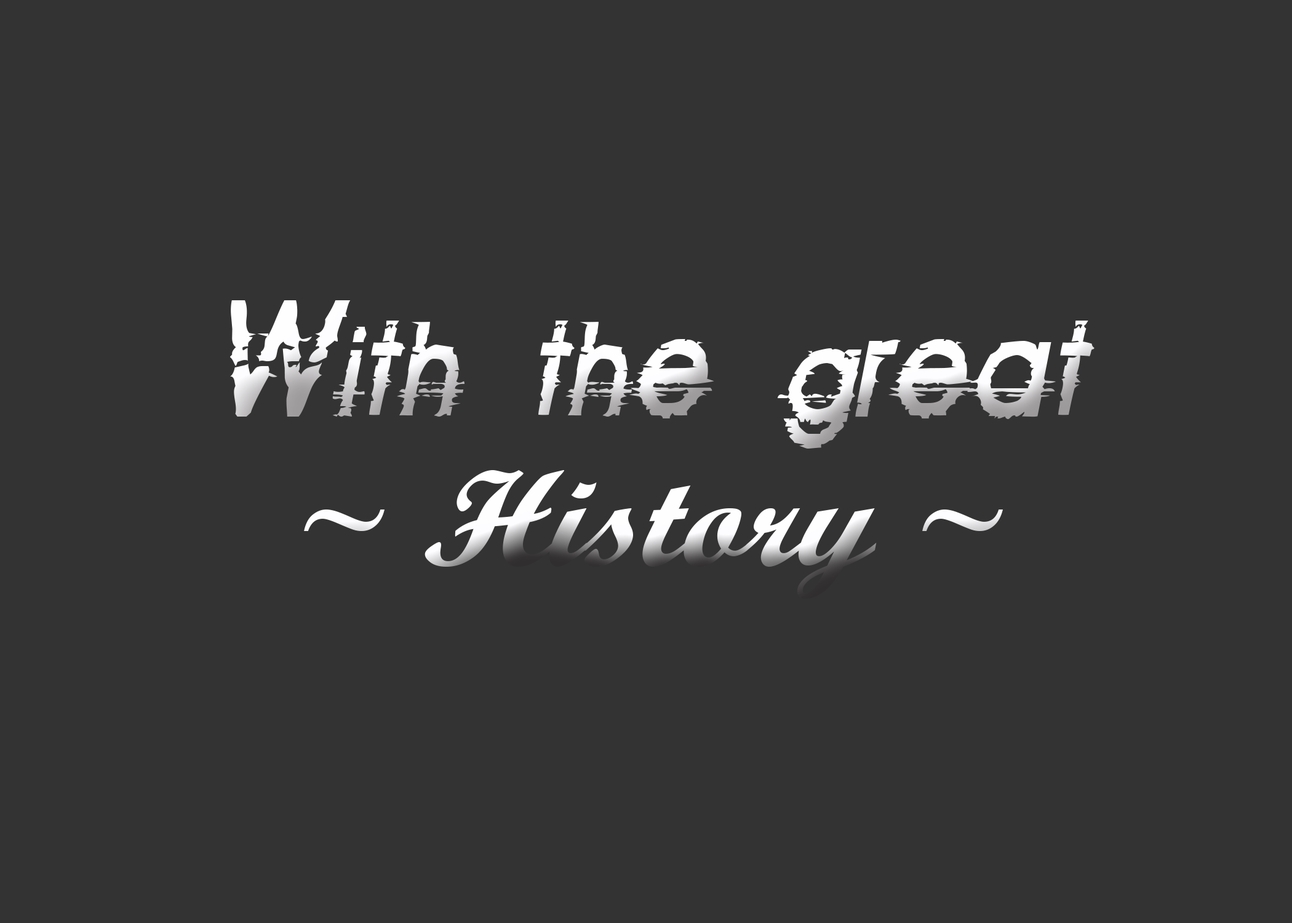
<style>
.page{position:relative;width:1292px;height:923px;background:#333333}
.page>*{position:absolute;margin:0}
.t1{font:127.5px "814yzx";font-style:italic;scale:1.11 1}
.t2{font:136px "ScriptMTBold";font-style:italic;scale:1.06 1}
</style>
<div class="page">
<p class="t1" style="left:229px;top:300px;width:866px;height:149px">With the great</p>
<p class="t2" style="left:304px;top:470px;width:699px;height:129px">~ History ~</p>
</div>
